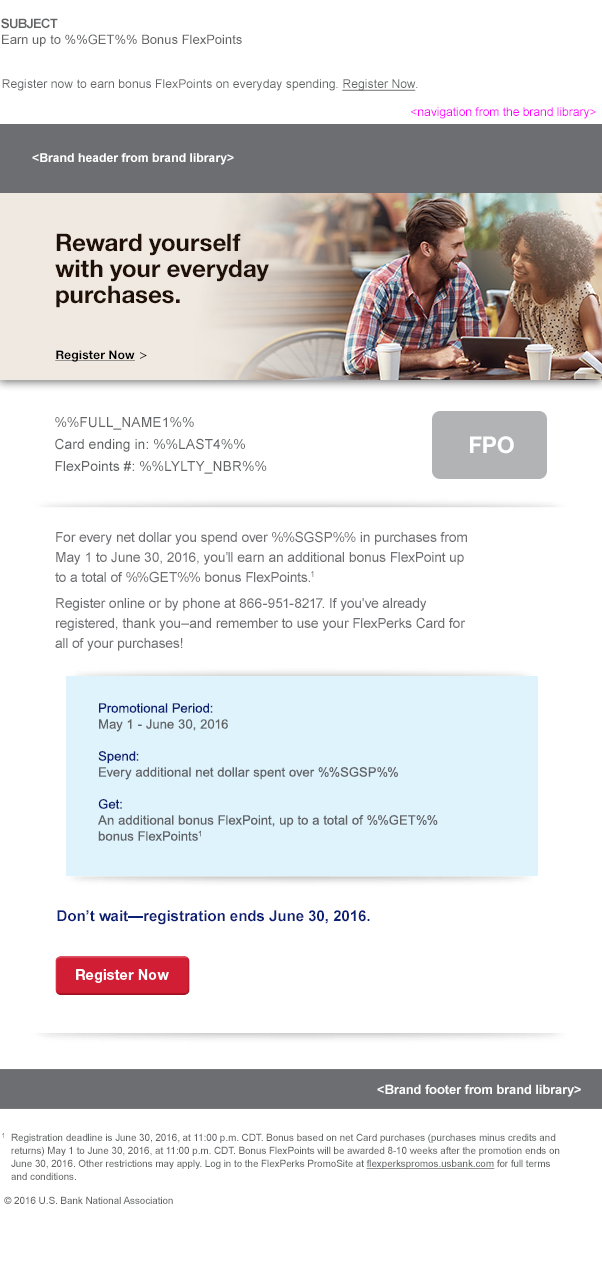
<style>
.page{position:relative;width:602px;height:1270px;background:#ffffff}
.page>*{position:absolute;margin:0}
.t1{font:13px/16px "ArialMT";color:#636466}
.t2{font:13px/16px "Arial-BoldMT";letter-spacing:-0.05em;color:#636466;text-transform:uppercase}
.t3{font:12px "ArialMT";letter-spacing:0.01em;color:#636466}
.t4{font:12px "ArialMT";letter-spacing:0.01em;color:#636466;text-decoration:underline}
.t5{font:12px "ArialMT";color:#ff00ff}
.t6{font:21px "Arial-BoldMT";color:#ffffff}
.t7{font:24px/26px "HelveticaNeueLTStd-Bd";letter-spacing:-0.005em;color:#211008}
.t8{font:12px "HelveticaNeueLTStd-Bd";letter-spacing:0.01em;color:#000000;text-decoration:underline}
.t9{font:12px "LucidaGrande";letter-spacing:0.01em;color:#000000}
.t10{font:24px/22px "ArialMT";color:#636466}
.t11{font:23px "HelveticaNeue-Bold";letter-spacing:-0.01em;color:#ffffff}
.t12{font:14px/20px "ArialMT";letter-spacing:-0.01em;color:#6d6e71}
.t13{font:13px/16px "ArialMT";letter-spacing:0.01em;color:#636466}
.t14{font:13px/16px "ArialMT";letter-spacing:0.01em;color:#0c2074}
.t15{font:15px "Arial-BoldMT";color:#0c2074}
.t16{font:13px "Arial-BoldMT";letter-spacing:-0.01em;color:#ffffff}
.t17{font:10px/12px "ArialMT";letter-spacing:-0.01em;color:#636466}
.t18{font:7px/13px "ArialMT";color:#636466}
.t19{font:10px/12px "ArialMT";letter-spacing:-0.01em;color:#636466;text-decoration:underline}
</style>
<div class="page">
<p class="t1" style="left:1px;top:18px;width:241px;height:29px"><span class="t2">Subject<br></span>Earn up to %%GET%% Bonus FlexPoints</p>
<p class="t3" style="left:2px;top:79px;width:416px;height:12px">Register now to earn bonus FlexPoints on everyday spending. <span class="t4">Register Now</span>.</p>
<p class="t5" style="left:411px;top:107px;width:185px;height:12px">&lt;navigation from the brand library&gt;</p>
<p class="t6" style="left:32px;top:153px;width:202px;height:12px">&lt;Brand header from brand library&gt;</p>
<p class="t7" style="left:55px;top:233px;width:214px;height:75px">Reward yourself <br>with your everyday <br>purchases.</p>
<p class="t8" style="left:55px;top:350px;width:92px;height:12px">Register Now<span class="t9"> &gt;</span></p>
<p class="t10" style="left:55px;top:417px;width:212px;height:57px">%%FULL_NAME1%%<br>Card ending in: %%LAST4%%<br>FlexPoints #: %%LYLTY_NBR%%</p>
<p class="t11" style="left:470px;top:436px;width:44px;height:18px">FPO</p>
<p class="t12" style="left:55px;top:531px;width:412px;height:120px">For every net dollar you spend over %%SGSP%% in purchases from  May 1 to June 30, 2016, you’ll earn an additional bonus FlexPoint up to a total of %%GET%% bonus FlexPoints.1 <br>Register online or by phone at 866-951-8217. If you've already registered, thank you–and remember to use your FlexPerks Card for all of your purchases!</p>
<p class="t13" style="left:98px;top:703px;width:340px;height:138px"><span class="t14">Promotional Period:<br></span>May 1 - June 30, 2016<br><br><span class="t14">Spend:<br></span>Every additional net dollar spent over %%SGSP%%<br><br><span class="t14">Get:<br></span>An additional bonus FlexPoint, up to a total of %%GET%% <br>bonus FlexPoints1</p>
<p class="t15" style="left:57px;top:910px;width:313px;height:15px">Don’t wait—registration ends June 30, 2016.</p>
<p class="t16" style="left:377px;top:1084px;width:204px;height:13px">&lt;Brand footer from brand library&gt;</p>
<p class="t17" style="left:2px;top:1133px;width:558px;height:71px"><span class="t18">1  </span>Registration deadline is June 30, 2016, at 11:00 p.m. CDT. Bonus based on net Card purchases (purchases minus credits and <br>    returns) May 1 to June 30, 2016, at 11:00 p.m. CDT. Bonus FlexPoints will be awarded 8-10 weeks after the promotion ends on <br>    June 30, 2016. Other restrictions may apply. Log in to the FlexPerks PromoSite at <span class="t19">flexperkspromos.usbank.com</span> for full terms <br>    and conditions.  <br> <br> © 2016 U.S. Bank National Association</p>
</div>
